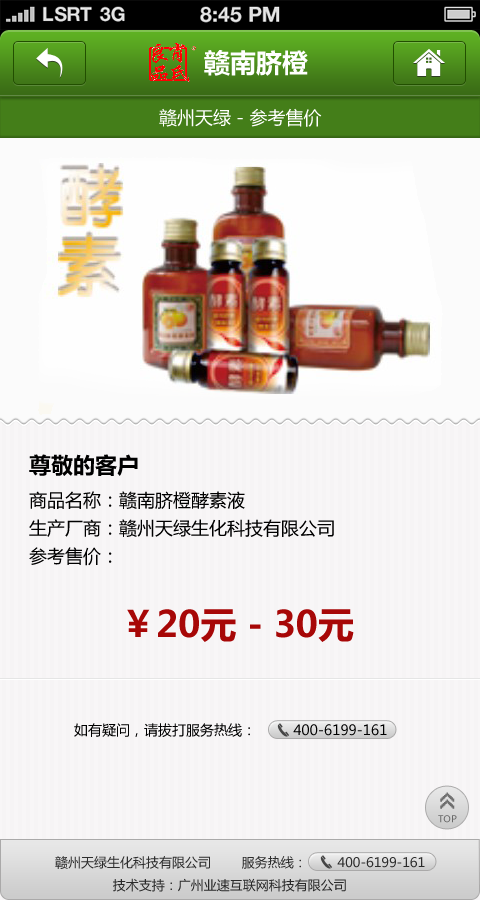
<style>
.page{position:relative;width:480px;height:900px;background:#f6f4f5}
.page>*{position:absolute;margin:0}
.t1{font:26px "MicrosoftYaHeiBold";color:#ffffff}
.t2{font:18px "MicrosoftYaHei";color:#ffffff}
.t3{font:18px/28px "MicrosoftYaHei";color:#000000}
.t4{font:22px/37px "MicrosoftYaHeiBold";color:#000000}
.t5{font:36px "MicrosoftYaHeiBold";color:#a70707}
.t6{font:14px "MicrosoftYaHei";color:#000000}
.t7{font:26px "8514oem";letter-spacing:-0.2em;color:#6f6f6f;font-weight:bold}
.t8{font:9.3px "MicrosoftYaHei";color:#686868}
.t9{font:13px "MicrosoftYaHei";color:#2c2c2c}
</style>
<div class="page">
<p class="t1" style="left:204px;top:50px;width:104px;height:26px">赣南脐橙</p>
<p class="t2" style="left:159px;top:108px;width:163px;height:19px">赣州天绿 - 参考售价</p>
<p class="t3" style="left:29px;top:454px;width:305px;height:112px"><span class="t4">尊敬的客户<br></span>商品名称：赣南脐橙酵素液<br>生产厂商：赣州天绿生化科技有限公司<br>参考售价：</p>
<p class="t5" style="left:127px;top:609px;width:227px;height:33px">￥20元 - 30元</p>
<p class="t6" style="left:74px;top:723px;width:313px;height:14px">如有疑问，请拔打服务热线：         400-6199-161</p>
<p class="t7" style="left:440px;top:792px;width:15px;height:17px;rotate:-90deg">&gt;&gt;</p>
<p class="t8" style="left:438px;top:815px;width:19px;height:8px">TOP</p>
<p class="t9" style="left:55px;top:856px;width:370px;height:36px">赣州天绿生化科技有限公司        服务热线：        400-6199-161<br>               技术支持：广州业速互联网科技有限公司</p>
</div>
